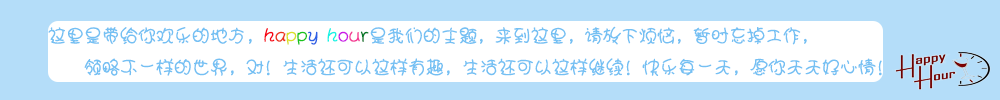
<style>
.page{position:relative;width:1000px;height:100px;background:#b4ddf9}
.page>*{position:absolute;margin:0}
.t1{font:18px "JWaWAZuan";color:#74c0f3}
.t2{font:18px "JWaWAZuan";color:#f70213}
.t3{font:18px "JWaWAZuan";color:#ec331b}
.t4{font:18px "JWaWAZuan";color:#d9e028}
.t5{font:18px "JWaWAZuan";color:#17c41b}
.t6{font:18px "JWaWAZuan";color:#2c60e5}
.t7{font:18px "JWaWAZuan";color:#17f2e5}
.t8{font:18px "JWaWAZuan";color:#cc1ae7}
.t9{font:18px "JWaWAZuan";color:#f43a96}
.t10{font:18px "JWaWAZuan";color:#047928}
</style>
<div class="page">
<p class="t1" style="left:48px;top:26px;width:834px;height:50px">这里是带给你欢乐的地方，<span class="t2">h</span><span class="t3">a</span><span class="t4">p</span><span class="t5">p</span><span class="t6">y </span><span class="t7">h</span><span class="t8">o</span><span class="t9">u</span><span class="t10">r</span>是我们的主题，来到这里，请放下烦恼，暂时忘掉工作，<br>    领略不一样的世界，对！生活还可以这样有趣，生活还可以这样继续！快乐每一天，愿你天天好心情！</p>
</div>
